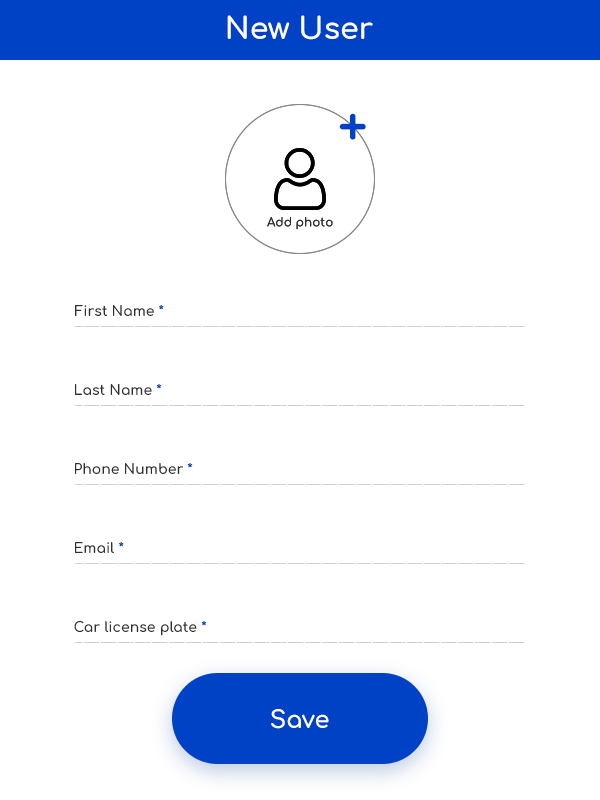
<style>
.page{position:relative;width:600px;height:800px;background:#ffffff}
.page>*{position:absolute;margin:0}
.t1{font:30px "Comfortaa-Bold";color:#fefefe}
.t2{font:54.8px "Comfortaa-Bold";color:#0042c5}
.t3{font:12px "Comfortaa-Bold";color:#303030}
.t4{font:14px "Comfortaa-Bold";color:#303030}
.t5{font:14px "Comfortaa-Bold";color:#0042c5}
.t6{font:24px "Comfortaa-Bold";color:#ffffff}
</style>
<div class="page">
<p class="t1" style="left:227px;top:15px;width:146px;height:25px">New User</p>
<p class="t2" style="left:339px;top:113px;width:27px;height:27px">+</p>
<p class="t3" style="left:267px;top:217px;width:66px;height:13px">Add photo</p>
<p class="t3" style="left:267px;top:217px;width:66px;height:13px">Add photo</p>
<p class="t4" style="left:75px;top:305px;width:89px;height:11px">First Name <span class="t5">*</span></p>
<p class="t4" style="left:75px;top:384px;width:87px;height:11px">Last Name <span class="t5">*</span></p>
<p class="t4" style="left:75px;top:463px;width:118px;height:11px">Phone Number <span class="t5">*</span></p>
<p class="t4" style="left:75px;top:542px;width:49px;height:11px">Email <span class="t5">*</span></p>
<p class="t4" style="left:74px;top:620px;width:133px;height:16px">Car license plate <span class="t5">*</span></p>
<p class="t6" style="left:271px;top:709px;width:58px;height:20px">Save</p>
</div>
